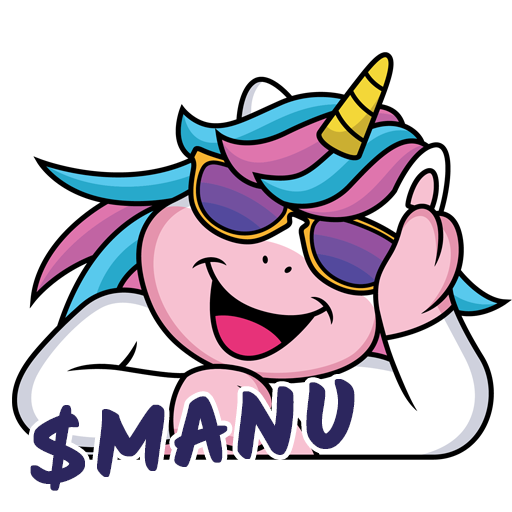
<style>
.page{position:relative;width:512px;height:512px;background:#ffffff}
.page>*{position:absolute;margin:0}
.t1{font:100px "Kalam-Bold";letter-spacing:0.025em;color:#2c265e;font-weight:bold}
</style>
<div class="page">
<p class="t1" style="left:30px;top:379px;width:325px;height:112px;rotate:-7deg">$MANU</p>
</div>
